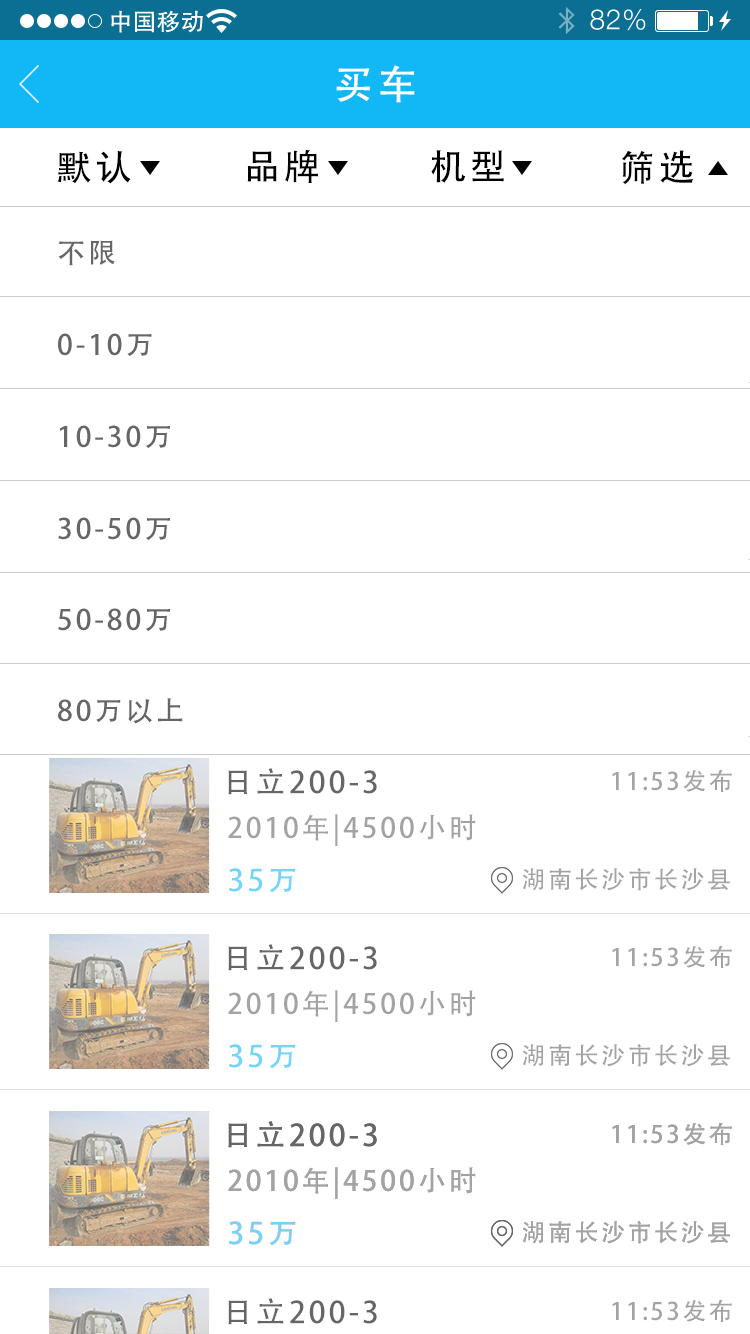
<style>
.page{position:relative;width:750px;height:1334px;background:#ffffff}
.page>*{position:absolute;margin:0}
.t1{font:40px "AdobeHeitiStd-Regular";letter-spacing:0.104em;color:#ffffff}
.t2{font:36px "AdobeHeitiStd-Regular";letter-spacing:0.104em;color:#000000}
.t3{font:28px "AdobeHeitiStd-Regular";letter-spacing:0.104em;color:#666666}
.t4{font:30px "AdobeHeitiStd-Regular";letter-spacing:0.104em;color:#666666}
.t5{font:24px "AdobeHeitiStd-Regular";letter-spacing:0.104em;color:#a3a3a3}
.t6{font:28px "AdobeHeitiStd-Regular";letter-spacing:0.104em;color:#a3a3a3}
.t7{font:30px "AdobeHeitiStd-Regular";letter-spacing:0.104em;color:#71d4fa}
</style>
<div class="page">
<p class="t1" style="left:336px;top:65px;width:79px;height:38px">买车</p>
<p class="t2" style="left:247px;top:149px;width:71px;height:34px">品牌</p>
<p class="t2" style="left:431px;top:150px;width:73px;height:33px">机型</p>
<p class="t2" style="left:621px;top:150px;width:73px;height:35px">筛选</p>
<p class="t2" style="left:57px;top:151px;width:74px;height:33px">默认</p>
<p class="t3" style="left:58px;top:240px;width:57px;height:26px">不限</p>
<p class="t3" style="left:58px;top:333px;width:94px;height:24px">0-10万</p>
<p class="t3" style="left:59px;top:425px;width:111px;height:24px">10-30万</p>
<p class="t3" style="left:58px;top:517px;width:112px;height:24px">30-50万</p>
<p class="t3" style="left:58px;top:608px;width:112px;height:24px">50-80万</p>
<p class="t3" style="left:58px;top:698px;width:125px;height:26px">80万以上</p>
<p class="t4" style="left:228px;top:768px;width:149px;height:27px">日立200-3</p>
<p class="t5" style="left:612px;top:769px;width:120px;height:23px">11:53发布</p>
<p class="t6" style="left:228px;top:814px;width:248px;height:32px">2010年|4500小时</p>
<p class="t7" style="left:228px;top:868px;width:68px;height:25px">35万</p>
<p class="t5" style="left:523px;top:868px;width:207px;height:23px">湖南长沙市长沙县</p>
<p class="t4" style="left:228px;top:944px;width:149px;height:27px">日立200-3</p>
<p class="t5" style="left:612px;top:945px;width:120px;height:23px">11:53发布</p>
<p class="t6" style="left:228px;top:990px;width:248px;height:32px">2010年|4500小时</p>
<p class="t7" style="left:228px;top:1044px;width:68px;height:25px">35万</p>
<p class="t5" style="left:523px;top:1044px;width:207px;height:23px">湖南长沙市长沙县</p>
<p class="t4" style="left:228px;top:1121px;width:149px;height:27px">日立200-3</p>
<p class="t4" style="left:228px;top:1121px;width:149px;height:27px">日立200-3</p>
<p class="t5" style="left:612px;top:1122px;width:120px;height:23px">11:53发布</p>
<p class="t5" style="left:612px;top:1122px;width:120px;height:23px">11:53发布</p>
<p class="t6" style="left:228px;top:1167px;width:248px;height:32px">2010年|4500小时</p>
<p class="t6" style="left:228px;top:1167px;width:248px;height:32px">2010年|4500小时</p>
<p class="t7" style="left:228px;top:1221px;width:68px;height:25px">35万</p>
<p class="t7" style="left:228px;top:1221px;width:68px;height:25px">35万</p>
<p class="t5" style="left:523px;top:1221px;width:207px;height:23px">湖南长沙市长沙县</p>
<p class="t5" style="left:523px;top:1221px;width:207px;height:23px">湖南长沙市长沙县</p>
<p class="t4" style="left:228px;top:1298px;width:149px;height:27px">日立200-3</p>
<p class="t5" style="left:612px;top:1299px;width:120px;height:23px">11:53发布</p>
</div>
